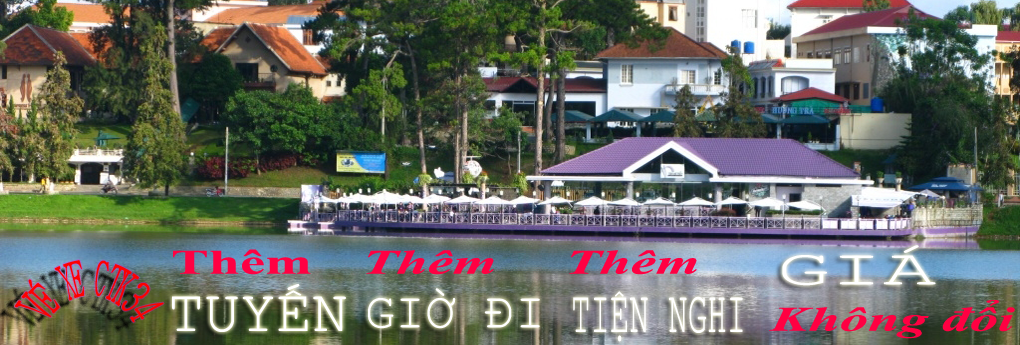
<style>
.page{position:relative;width:1020px;height:345px}
.page>*{position:absolute;margin:0}
.t1{font:50px "CourierNewPSMT";color:#ffffff;scale:1.77 1}
.t2{font:34.4px "TimesNewRomanPS-BoldMT";color:#ff0042;scale:1.64 1}
.t3{font:34.4px "TimesNewRomanPS-BoldItalicMT";color:#ff0042;scale:1.64 1}
.t4{font:28.8px "BatangChe";color:#fe0000;scale:0.65 1}
.t5{font:60px "CourierNewPSMT";color:#ffffff}
.t6{font:50px "CourierNewPSMT";color:#ffffff}
.t7{font:60px "CourierNewPSMT";color:#ffffff;scale:0.54 1}
</style>
<div class="page">
<p class="t1" style="left:782px;top:245px;width:154px;height:41px">GIÁ</p>
<p class="t2" style="left:173px;top:249px;width:138px;height:26px">Thêm</p>
<p class="t3" style="left:366px;top:250px;width:128px;height:25px">Thêm</p>
<p class="t3" style="left:569px;top:250px;width:128px;height:25px">Thêm</p>
<p class="t4" style="left:14px;top:260px;width:150px;height:63px">VÉ XE CTK34</p>
<p class="t5" style="left:172px;top:284px;width:174px;height:48px">TUYẾN</p>
<p class="t6" style="left:368px;top:288px;width:172px;height:41px">GIỜ ĐI</p>
<p class="t7" style="left:573px;top:291px;width:170px;height:51px">TIỆN NGHI</p>
<p class="t3" style="left:769px;top:300px;width:246px;height:39px">Không đổi</p>
</div>
